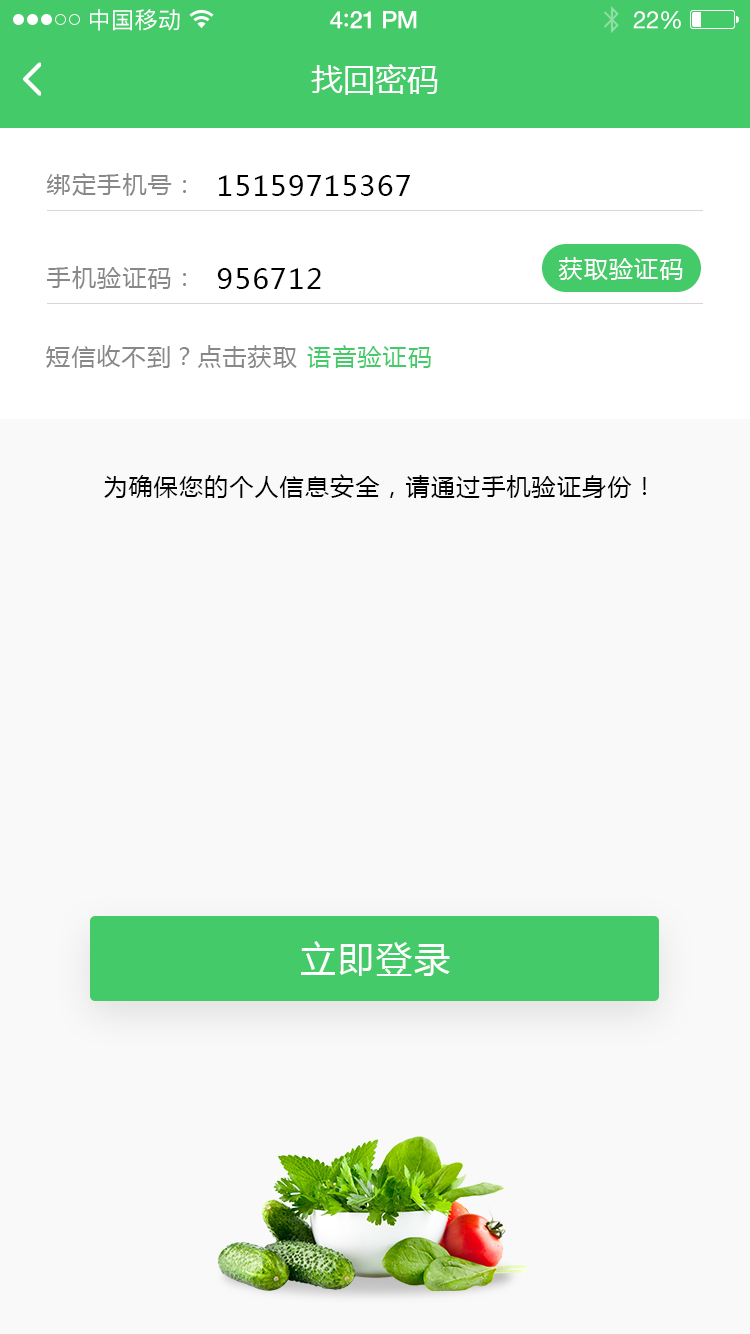
<style>
.page{position:relative;width:750px;height:1334px;background:#f9f9f9}
.page>*{position:absolute;margin:0}
.t1{font:23px "PingFangSC-Regular";letter-spacing:0.02em;color:#ffffff}
.t2{font:24px "HelveticaNeue-Medium";letter-spacing:-0.02em;color:#ffffff}
.t3{font:26px "Avenir-Medium";letter-spacing:-0.02em;color:#ffffff}
.t4{font:24px "HelveticaNeue";letter-spacing:-0.02em;color:#ffffff}
.t5{font:32px "MicrosoftYaHei";color:#ffffff;text-transform:uppercase}
.t6{font:24px "MicrosoftYaHei";letter-spacing:0.05em;color:#888888;text-transform:uppercase}
.t7{font:28px "MicrosoftYaHei";letter-spacing:0.05em;color:#010101;text-transform:uppercase}
.t8{font:24px "MicrosoftYaHei";letter-spacing:0.05em;color:#ffffff;text-transform:uppercase}
.t9{font:24px "MicrosoftYaHei";letter-spacing:0.05em;color:#44ca68;text-transform:uppercase}
.t10{font:24px "MicrosoftYaHei";letter-spacing:0.05em;color:#000000;text-transform:uppercase}
.t11{font:36px "MicrosoftYaHei";letter-spacing:0.06em;color:#ffffff;text-transform:uppercase}
</style>
<div class="page">
<p class="t1" style="left:90px;top:9px;width:90px;height:22px">中国移动</p>
<p class="t2" style="left:330px;top:11px;width:87px;height:18px">4<span class="t3">:</span>21 PM</p>
<p class="t4" style="left:633px;top:11px;width:48px;height:18px">22%</p>
<p class="t5" style="left:311px;top:64px;width:127px;height:31px">找回密码</p>
<p class="t6" style="left:46px;top:173px;width:140px;height:23px">绑定手机号：</p>
<p class="t7" style="left:219px;top:175px;width:191px;height:21px">15159715367</p>
<p class="t8" style="left:558px;top:257px;width:125px;height:23px">获取验证码</p>
<p class="t6" style="left:47px;top:266px;width:139px;height:23px">手机验证码：</p>
<p class="t7" style="left:217px;top:268px;width:104px;height:21px">956712</p>
<p class="t6" style="left:46px;top:345px;width:251px;height:23px">短信收不到？点击获取</p>
<p class="t9" style="left:307px;top:345px;width:124px;height:23px">语音验证码</p>
<p class="t10" style="left:104px;top:474px;width:542px;height:24px">为确保您的个人信息安全，请通过手机验证身份！</p>
<p class="t11" style="left:301px;top:941px;width:149px;height:35px">立即登录</p>
</div>
